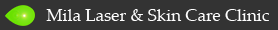
<style>
.page{position:relative;width:278px;height:30px;background:#333333}
.page>*{position:absolute;margin:0}
.t1{font:17px "PalatinoLinotype-Roman";color:#ffffff}
</style>
<div class="page">
<p class="t1" style="left:46px;top:9px;width:223px;height:12px">Mila Laser &amp; Skin Care Clinic</p>
</div>
